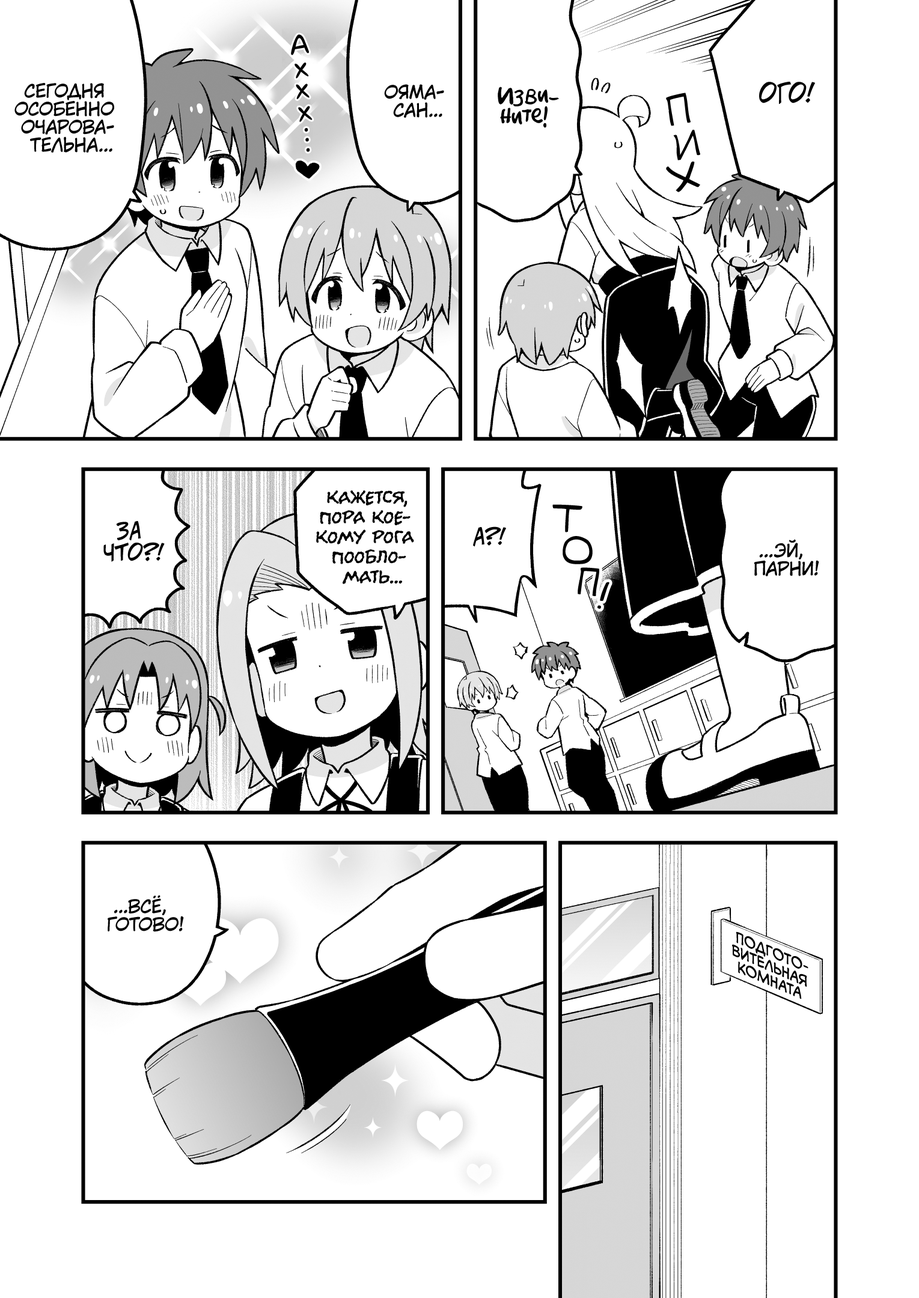
<style>
.page{position:relative;width:919px;height:1298px;background:#ffffff}
.page>*{position:absolute;margin:0}
.t1{font:28.8px "laCartoonerie";color:#000000}
.t2{font:18px "KuraiVoice2";color:#000000;text-transform:uppercase}
.t3{font:21.6px "AkbarPlain";color:#000000}
.t4{font:25.2px "v_CCJeffCampbell";color:#000000;text-transform:uppercase}
.t5{font:39.7px "v_Augie";color:#000000;text-transform:uppercase}
.t6{font:19.8px "el_CCEvilSchemes";color:#000000;text-transform:uppercase}
.t7{font:36.1px "v_Augie";color:#000000;text-transform:uppercase;font-weight:bold}
.t8{font:21.6px "v_CCJeffCampbell";color:#000000;text-transform:uppercase}
.t9{font:14.4px "v_CCMonologous";color:#000000;text-transform:uppercase}
</style>
<div class="page">
<p class="t1" style="left:291px;top:34px;width:18px;height:21px;rotate:-4deg">А</p>
<p class="t1" style="left:294px;top:62px;width:15px;height:17px;rotate:-5deg">х</p>
<p class="t2" style="left:14px;top:83px;width:100px;height:70px;text-align:center">Сегодня<br>особенно<br>очарова-<br>тельна...</p>
<p class="t1" style="left:296px;top:84px;width:13px;height:15px;rotate:-2deg">х</p>
<p class="t2" style="left:384px;top:84px;width:60px;height:34px;text-align:center">Ояма-<br>сан...</p>
<p class="t3" style="left:498px;top:87px;width:61px;height:41px;text-align:center">Изви-<br>ните!</p>
<p class="t4" style="left:759px;top:82px;width:56px;height:22px">Ого!</p>
<p class="t5" style="left:666px;top:93px;width:24px;height:33px;rotate:-10deg">п</p>
<p class="t1" style="left:298px;top:106px;width:14px;height:16px;rotate:-5deg">х</p>
<p class="t1" style="left:304px;top:128px;width:4px;height:4px">.</p>
<p class="t1" style="left:305px;top:138px;width:4px;height:4px">.</p>
<p class="t5" style="left:673px;top:129px;width:27px;height:31px;rotate:-9deg">и</p>
<p class="t1" style="left:306px;top:148px;width:4px;height:4px">.</p>
<p class="t5" style="left:666px;top:161px;width:34px;height:31px;rotate:-3deg">х</p>
<p class="t6" style="left:316px;top:490px;width:98px;height:94px;text-align:center">Кажется,<br>пора кое-<br>кому рога<br>пообло-<br>мать...</p>
<p class="t7" style="left:552px;top:504px;width:30px;height:28px;rotate:8deg">т</p>
<p class="t8" style="left:103px;top:521px;width:62px;height:41px;text-align:center">За<br>что?!</p>
<p class="t8" style="left:473px;top:526px;width:33px;height:21px">А?!</p>
<p class="t7" style="left:562px;top:536px;width:30px;height:28px">о</p>
<p class="t2" style="left:754px;top:539px;width:65px;height:37px;text-align:center">...Эй,<br>парни!</p>
<p class="t7" style="left:577px;top:567px;width:22px;height:29px;rotate:8deg">п</p>
<p class="t7" style="left:597px;top:582px;width:12px;height:27px;rotate:21deg">!</p>
<p class="t2" style="left:108px;top:895px;width:76px;height:37px;text-align:center">...Всё,<br>готово!</p>
<p class="t9" style="left:732px;top:931px;width:76px;height:68px;text-align:center;rotate:23deg">Подгото-<br>вительная<br>комната</p>
</div>
